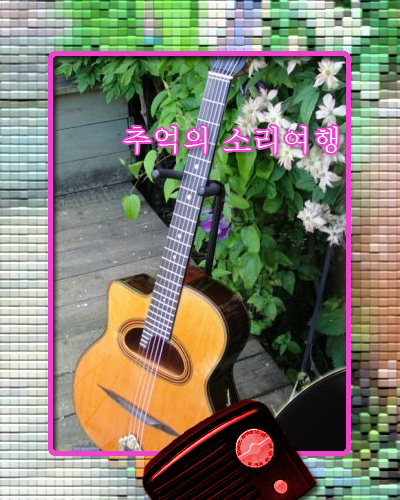
<style>
.page{position:relative;width:400px;height:500px}
.page>*{position:absolute;margin:0}
.t1{font:30px "Batang";color:#ffffff}
</style>
<div class="page">
<p class="t1" style="left:123px;top:126px;width:215px;height:28px">추억의 소리여행</p>
</div>
